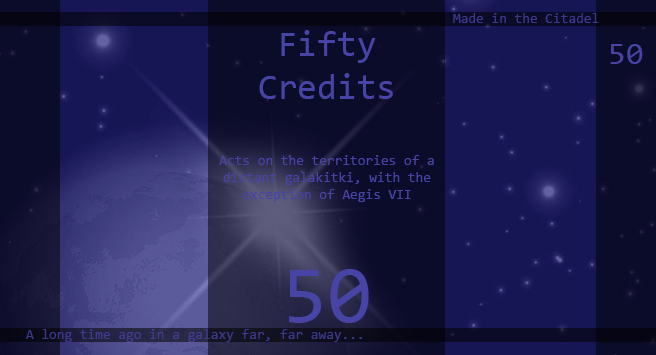
<style>
.page{position:relative;width:656px;height:355px;background:#0b0b2a}
.page>*{position:absolute;margin:0}
.t1{font:14px "Consolas";color:#3b388c}
.t2{font:36px "Consolas";color:#4744a5}
.t3{font:32px "Consolas";color:#4744a5}
.t4{font:14px "Consolas";color:#4744a5}
.t5{font:82px "Consolas";color:#4744a5}
.t6{font:14px "Consolas";color:#3c3a8b}
</style>
<div class="page">
<p class="t1" style="left:453px;top:13px;width:146px;height:10px">Made in the Citadel</p>
<p class="t2" style="left:259px;top:30px;width:134px;height:69px;text-align:center">Fifty<br>Credits</p>
<p class="t3" style="left:610px;top:44px;width:33px;height:20px">50</p>
<p class="t4" style="left:219px;top:155px;width:215px;height:47px;text-align:center">Acts on the territories of a distant galakitki, with the exception of Aegis VII</p>
<p class="t5" style="left:289px;top:269px;width:80px;height:54px;text-align:center">50<br>0</p>
<p class="t6" style="left:26px;top:329px;width:336px;height:13px">A long time ago in a galaxy far, far away...</p>
</div>
